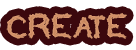
<style>
.page{position:relative;width:136px;height:50px;background:#3b080d}
.page>*{position:absolute;margin:0}
.t1{font:32px "TOBACCO";color:#c4845a;font-weight:bold}
</style>
<div class="page">
<p class="t1" style="left:6px;top:13px;width:121px;height:26px">CREATE</p>
</div>
